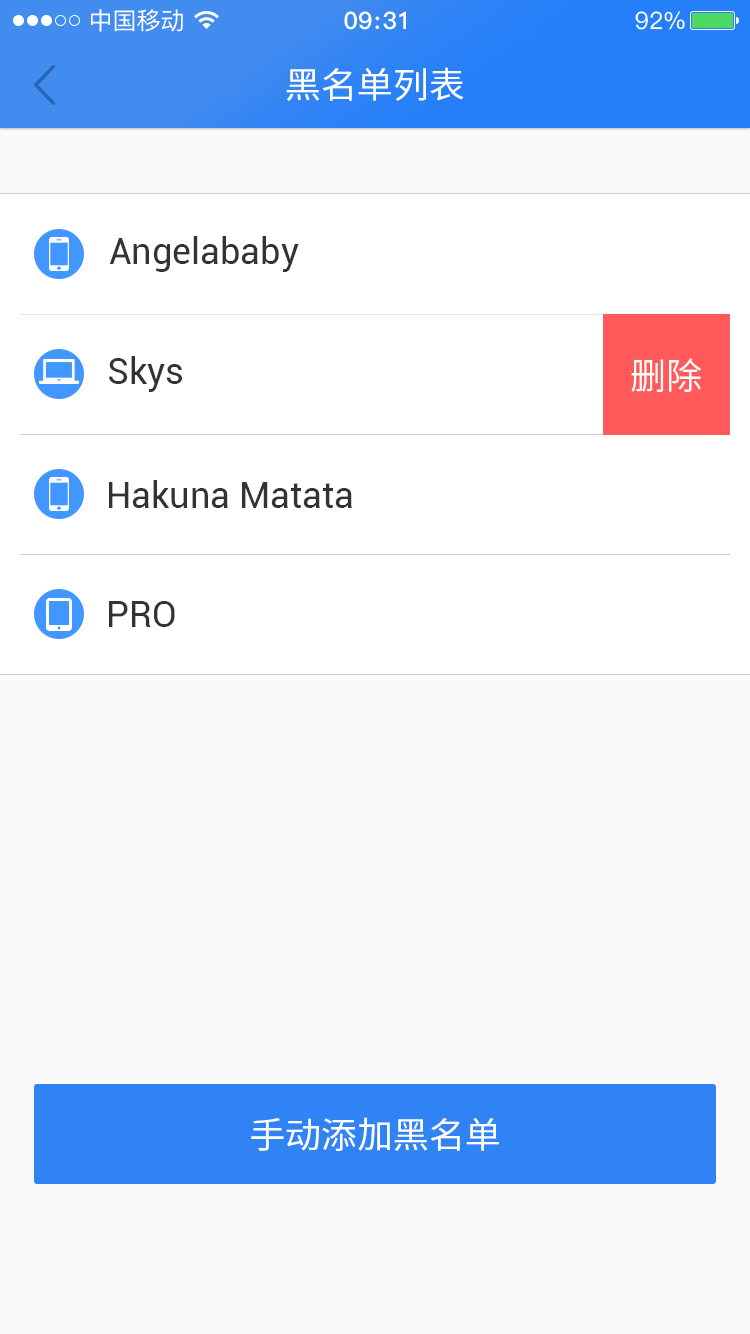
<style>
.page{position:relative;width:750px;height:1334px;background:#fafafa}
.page>*{position:absolute;margin:0}
.t1{font:36px "SourceHanSansCN-Regular";color:#ffffff}
.t2{font:36px "Roboto-Regular";color:#333333}
.t3{font:36px "SourceHanSansCN-Normal";color:#ffffff}
</style>
<div class="page">
<p class="t1" style="left:286px;top:67px;width:178px;height:34px">黑名单列表</p>
<p class="t2" style="left:109px;top:236px;width:190px;height:36px">Angelababy</p>
<p class="t2" style="left:109px;top:356px;width:73px;height:36px">Skys</p>
<p class="t3" style="left:631px;top:358px;width:70px;height:34px">删除</p>
<p class="t2" style="left:109px;top:480px;width:243px;height:28px">Hakuna Matata</p>
<p class="t2" style="left:109px;top:601px;width:66px;height:26px">PRO</p>
<p class="t1" style="left:251px;top:1117px;width:248px;height:34px">手动添加黑名单</p>
</div>
